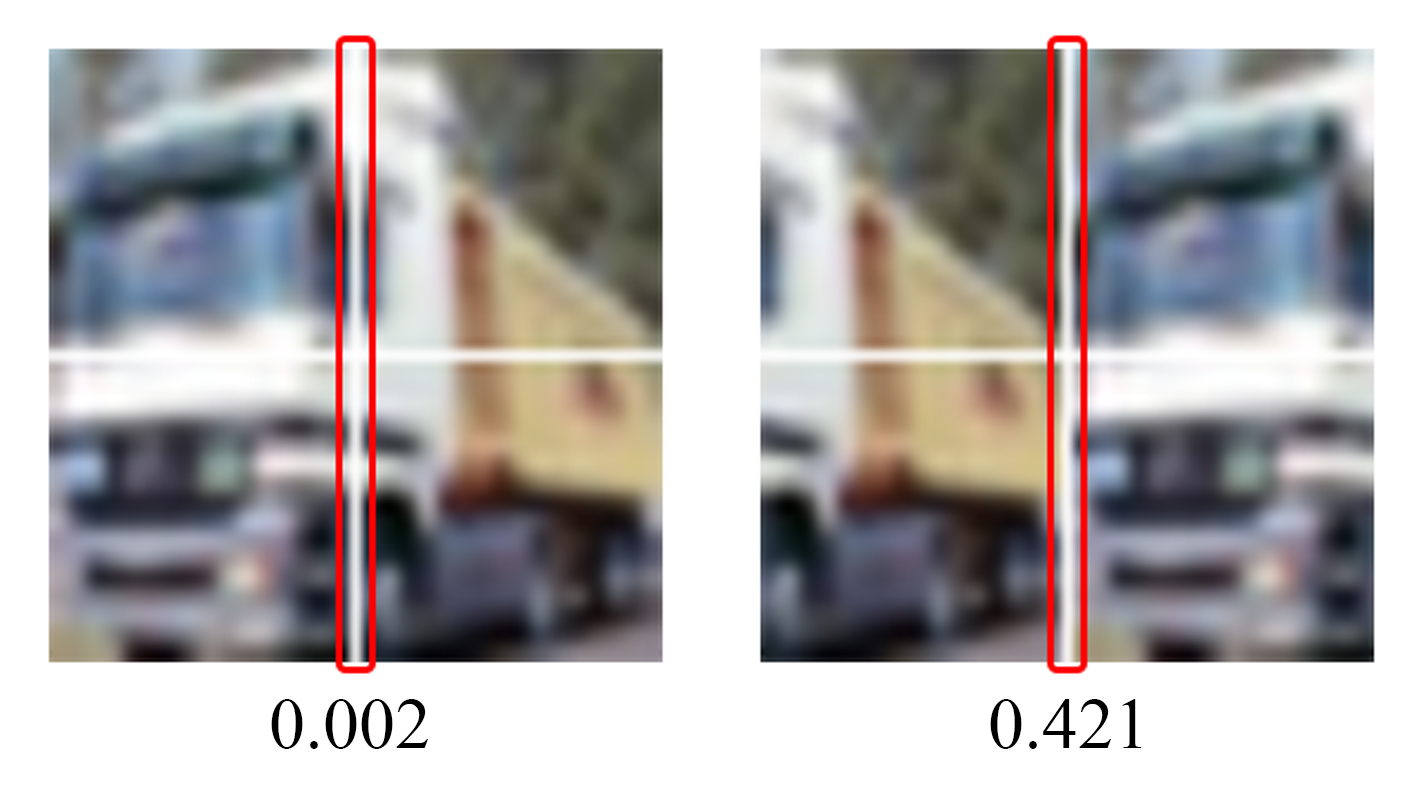
<style>
.page{position:relative;width:1422px;height:800px;background:#ffffff}
.page>*{position:absolute;margin:0}
.t1{font:72px "TimesNewRomanPSMT";color:#000000}
</style>
<div class="page">
<p class="t1" style="left:271px;top:699px;width:157px;height:50px">0.002</p>
<p class="t1" style="left:990px;top:699px;width:152px;height:50px">0.421</p>
</div>
